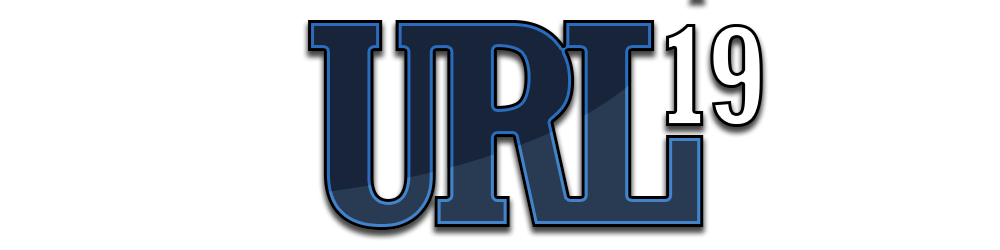
<style>
.page{position:relative;width:1000px;height:250px;background:#ffffff}
.page>*{position:absolute;margin:0}
.t1{font:294.5px "Rockwell-CondensedBold";letter-spacing:0.2em}
</style>
<div class="page">
<p class="t1" style="left:308px;top:20px;width:145px;height:210px">U</p>
<p class="t1" style="left:434px;top:20px;width:145px;height:207px">R</p>
<p class="t1" style="left:563px;top:20px;width:141px;height:207px">L</p>
</div>
